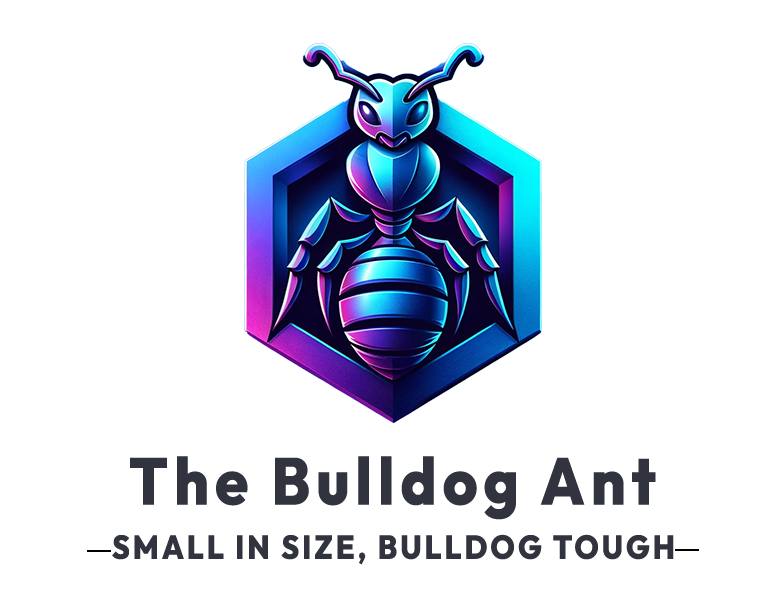
<style>
.page{position:relative;width:775px;height:602px;background:#ffffff}
.page>*{position:absolute;margin:0}
.t1{font:66px "Outfit-ExtraBold";letter-spacing:0.1em;color:#31343e;scale:0.91 1}
.t2{font:33px "Outfit-ExtraBold";letter-spacing:0.1em;color:#31343e;scale:0.91 1}
</style>
<div class="page">
<p class="t1" style="left:130px;top:456px;width:526px;height:64px">The Bulldog Ant</p>
<p class="t2" style="left:112px;top:534px;width:562px;height:31px">SMALL IN SIZE, BULLDOG TOUGH</p>
</div>
